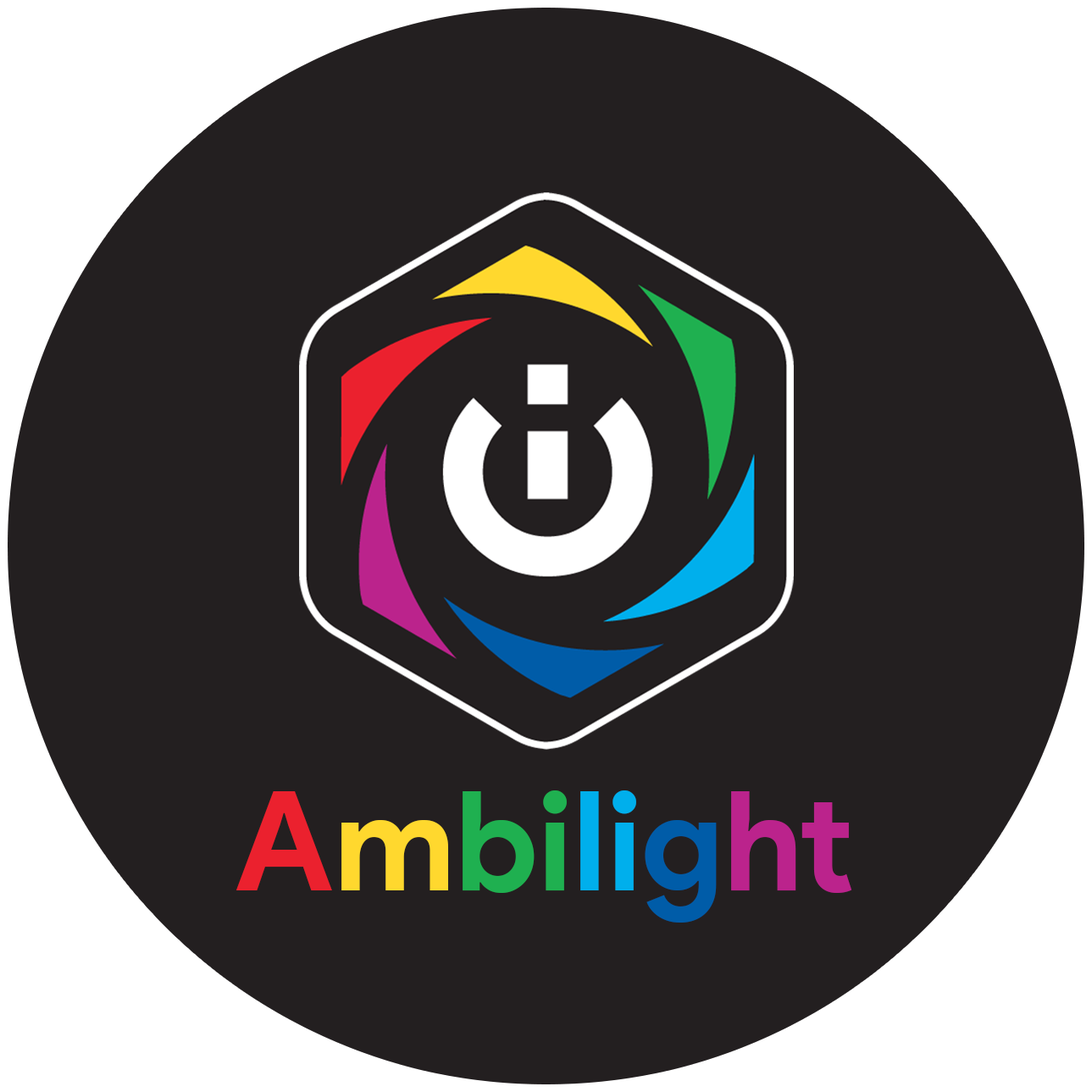
<style>
.page{position:relative;width:1092px;height:1092px;background:#231f20}
.page>*{position:absolute;margin:0}
.t1{font:137.9px "ProductSans-Bold";color:#1fb050}
.t2{font:137.9px "ProductSans-Bold";color:#eb212e}
.t3{font:137.9px "ProductSans-Bold";color:#ffd82e}
.t4{font:137.9px "ProductSans-Bold";color:#00afec}
.t5{font:137.9px "ProductSans-Bold";color:#005ca8}
.t6{font:137.9px "ProductSans-Bold";color:#bb238c}
</style>
<div class="page">
<p class="t1" style="left:236px;top:790px;width:616px;height:133px"><span class="t2">A</span><span class="t3">m</span>bi<span class="t4">li</span><span class="t5">g</span><span class="t6">ht</span></p>
</div>
